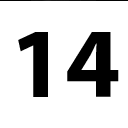
<style>
.page{position:relative;width:128px;height:128px;background:#ffffff}
.page>*{position:absolute;margin:0}
.t1{font:99.7px "MyriadHebrew-Bold";color:#000000}
</style>
<div class="page">
<p class="t1" style="left:18px;top:31px;width:101px;height:65px">14</p>
</div>
